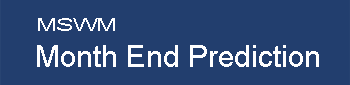
<style>
.page{position:relative;width:350px;height:85px;background:#223e6e}
.page>*{position:absolute;margin:0}
.t1{font:18px "ArialMT";color:#ffffff;scale:1.37 1}
.t2{font:30px "ArialMT";color:#ffffff}
</style>
<div class="page">
<p class="t1" style="left:38px;top:18px;width:77px;height:13px">MSWM</p>
<p class="t2" style="left:37px;top:45px;width:282px;height:22px">Month End Prediction</p>
</div>
